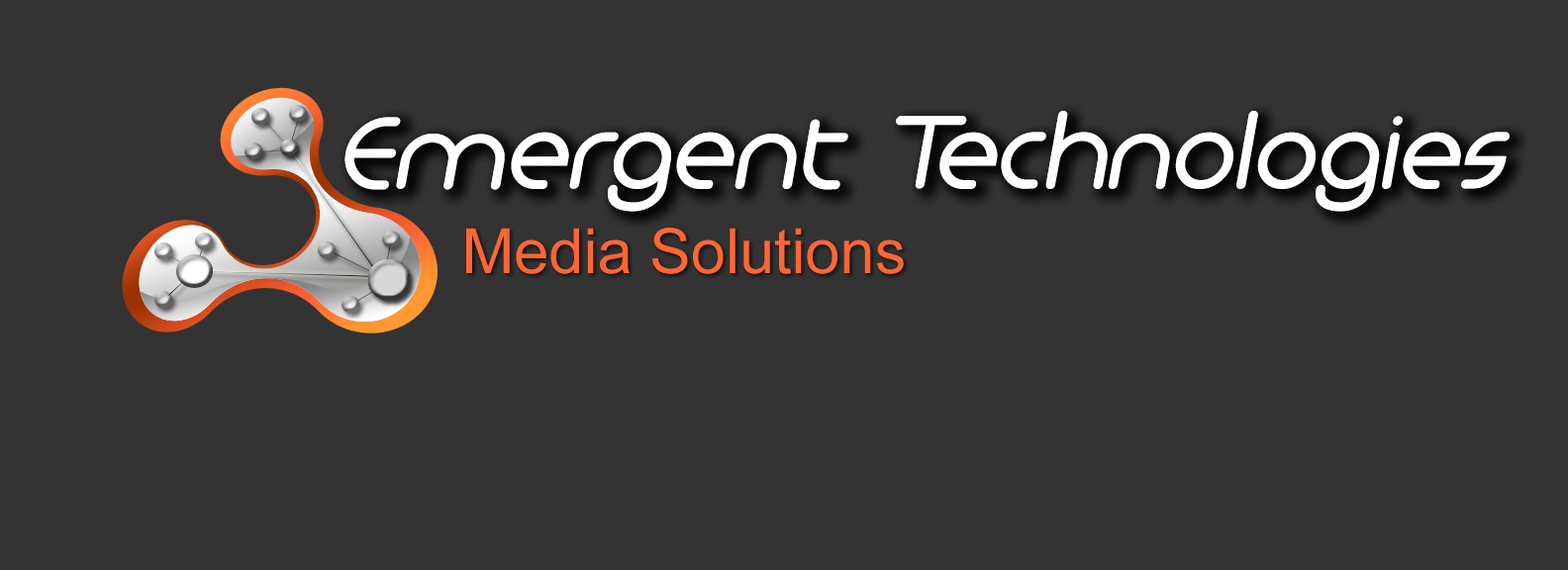
<style>
.page{position:relative;width:1568px;height:570px;background:#333333}
.page>*{position:absolute;margin:0}
.t1{font:108.9px "Monoglyceride";color:#ffffff;font-weight:bold;font-style:italic}
.t2{font:62.4px "ArialMT";color:#ff6633}
</style>
<div class="page">
<p class="t1" style="left:344px;top:111px;width:1166px;height:101px">Emergent Technologies</p>
<p class="t1" style="left:344px;top:111px;width:1166px;height:101px">Emergent Technologies</p>
<p class="t2" style="left:466px;top:228px;width:438px;height:46px">Media Solutions</p>
</div>
